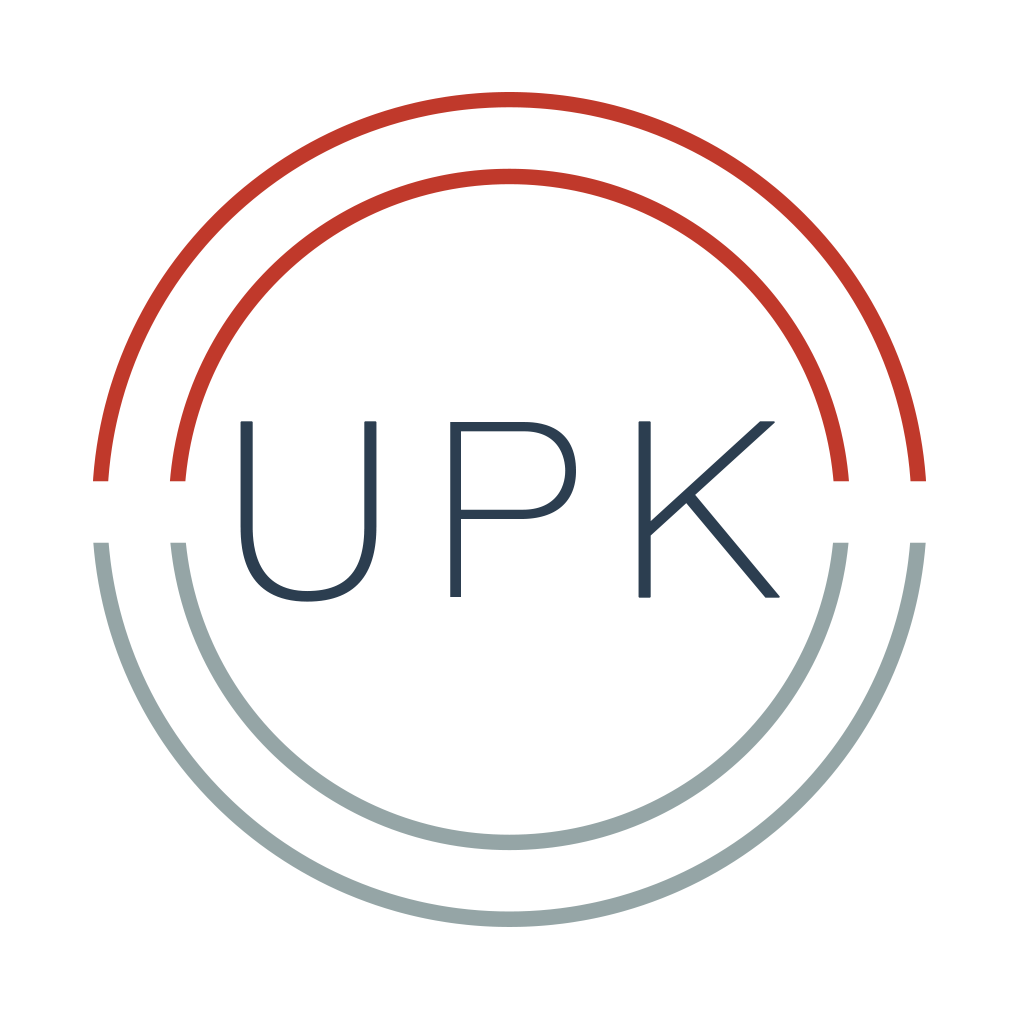
<style>
.page{position:relative;width:1024px;height:1024px;background:#ffffff}
.page>*{position:absolute;margin:0}
.t1{font:245.8px "HelveticaNeueLTPro-Th";letter-spacing:0.15em;color:#2c3e50;text-transform:uppercase;font-weight:bold}
</style>
<div class="page">
<p class="t1" style="left:240px;top:421px;width:540px;height:181px">UPK</p>
</div>
